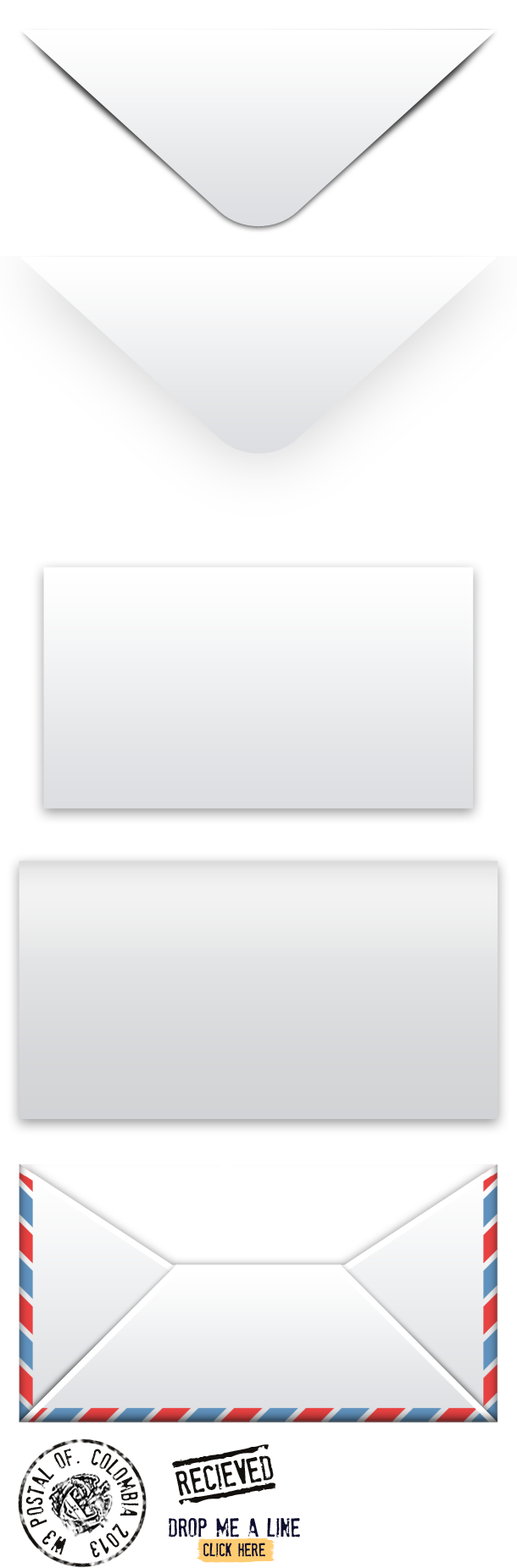
<style>
.page{position:relative;width:517px;height:1568px;background:#ffffff}
.page>*{position:absolute;margin:0}
.t1{font:117.8px "StamPete";color:#120f0c;text-transform:uppercase;scale:0.45 1}
.t2{font:20.3px "StamPete";color:#120f0c;text-transform:uppercase}
.t3{font:30.5px "StamPete";color:#120f0c;text-transform:uppercase}
.t4{font:22.9px/24.6px "StamPete";color:#0e0d2d;text-transform:uppercase}
.t5{font:16.1px/19.5px "StamPete";color:#0e0d2d;text-transform:uppercase}
</style>
<div class="page">
<p class="t1" style="left:172px;top:1444px;width:97px;height:24px;rotate:79deg">I</p>
<p class="t2" style="left:25px;top:1449px;width:114px;height:109px;rotate:-169deg">w3 postal of. colombia 2013</p>
<p class="t3" style="left:175px;top:1455px;width:99px;height:41px;rotate:-11deg">recieved</p>
<p class="t1" style="left:179px;top:1482px;width:97px;height:23px;rotate:79deg">I</p>
<p class="t4" style="left:169px;top:1518px;width:131px;height:39px;text-align:center">drop me a line<br><span class="t5">click here</span></p>
</div>
